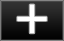
<style>
.page{position:relative;width:64px;height:41px}
.page>*{position:absolute;margin:0}
.t1{font:60px "Gotham-Book";color:#ffffff}
</style>
<div class="page">
<p class="t1" style="left:17px;top:4px;width:30px;height:30px">+</p>
</div>
